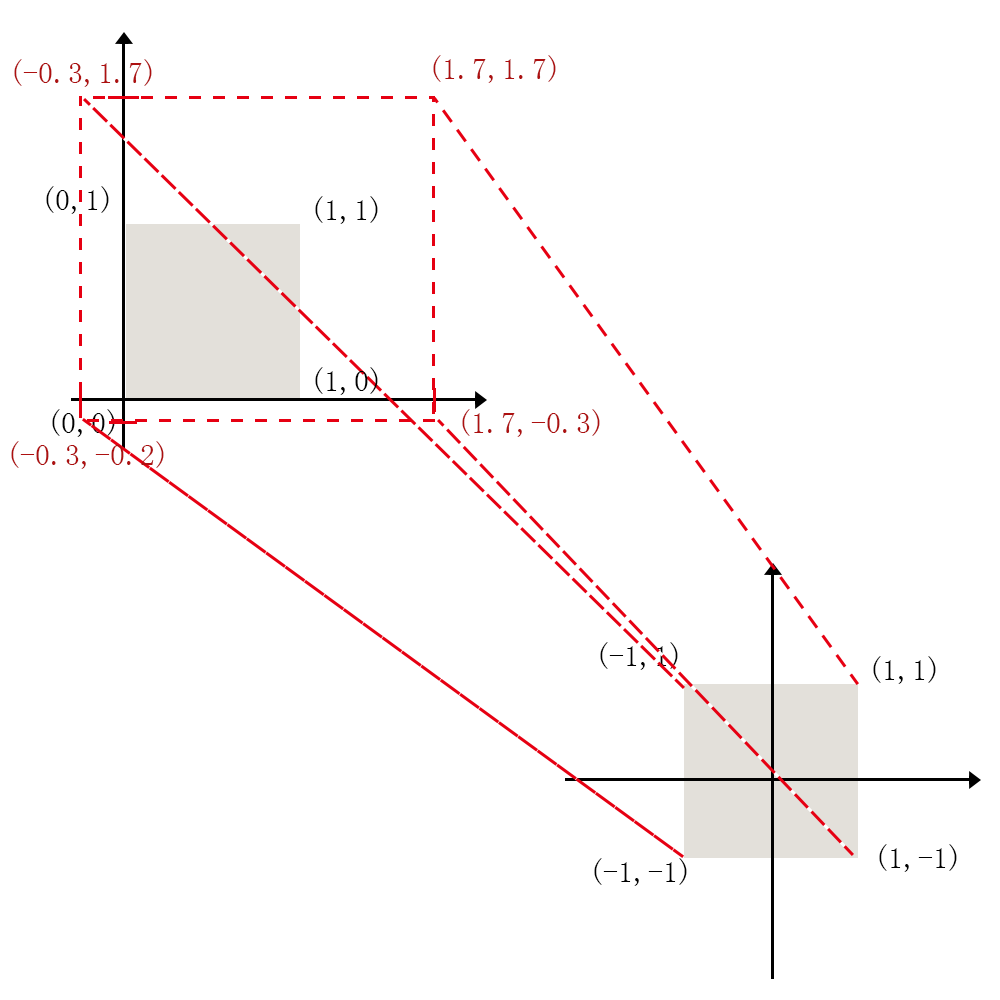
<style>
.page{position:relative;width:1000px;height:1000px;background:#ffffff}
.page>*{position:absolute;margin:0}
.t1{font:30px "SimSun";color:#ad1010}
.t2{font:30px "SimSun";color:#000000}
</style>
<div class="page">
<p class="t1" style="left:14px;top:59px;width:138px;height:28px">(-0.3,1.7)</p>
<p class="t1" style="left:433px;top:55px;width:123px;height:28px">(1.7,1.7)</p>
<p class="t2" style="left:46px;top:186px;width:63px;height:28px">(0,1)</p>
<p class="t2" style="left:315px;top:196px;width:63px;height:28px">(1,1)</p>
<p class="t2" style="left:315px;top:367px;width:63px;height:28px">(1,0)</p>
<p class="t2" style="left:52px;top:409px;width:63px;height:28px">(0,0)</p>
<p class="t1" style="left:462px;top:409px;width:138px;height:28px">(1.7,-0.3)</p>
<p class="t1" style="left:11px;top:441px;width:153px;height:28px">(-0.3,-0.2)</p>
<p class="t2" style="left:600px;top:642px;width:78px;height:28px">(-1,1)</p>
<p class="t2" style="left:873px;top:656px;width:63px;height:28px">(1,1)</p>
<p class="t2" style="left:879px;top:844px;width:78px;height:28px">(1,-1)</p>
<p class="t2" style="left:594px;top:858px;width:93px;height:28px">(-1,-1)</p>
</div>
